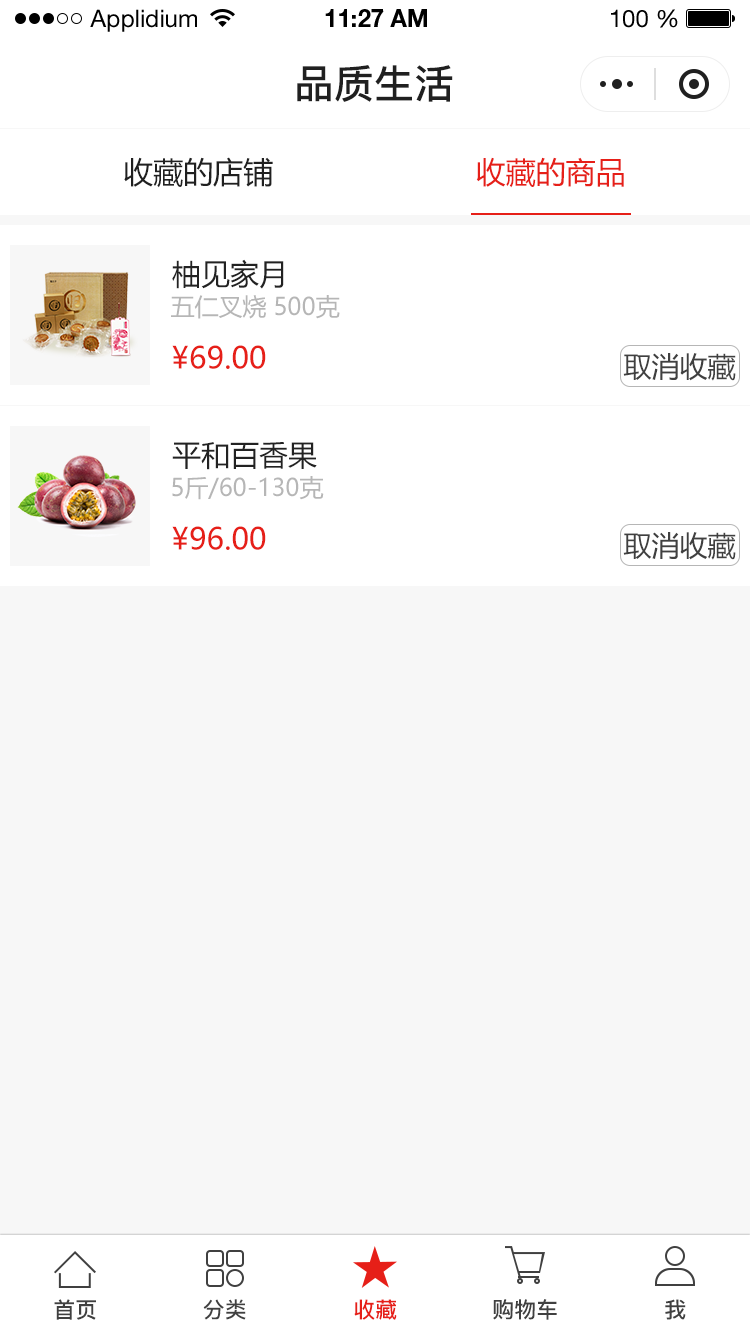
<style>
.page{position:relative;width:750px;height:1334px;background:#f7f7f7}
.page>*{position:absolute;margin:0}
.t1{font:24px "HelveticaNeueLTStd-Roman";color:#000000}
.t2{font:24px "HelveticaNeueLTStd-Bd";color:#000000}
.t3{font:40px "PingFang-SC-Bold";color:#202020;text-transform:uppercase}
.t4{font:30px "MicrosoftYaHei";color:#202020;text-transform:uppercase}
.t5{font:30px "MicrosoftYaHei";color:#e61f18;text-transform:uppercase}
.t6{font:29px "MicrosoftYaHei";color:#222222;text-transform:uppercase}
.t7{font:24px "MicrosoftYaHei";color:#b6b6b6;text-transform:uppercase}
.t8{font:28px "MicrosoftYaHei";color:#404040;text-transform:uppercase}
.t9{font:22px "PingFang-SC-Bold";color:#404040;text-transform:uppercase}
.t10{font:22px "PingFang-SC-Bold";color:#e61f18;text-transform:uppercase}
</style>
<div class="page">
<p class="t1" style="left:90px;top:9px;width:107px;height:23px">Applidium</p>
<p class="t2" style="left:325px;top:9px;width:102px;height:18px">11:27 AM</p>
<p class="t1" style="left:611px;top:9px;width:67px;height:19px">100 %</p>
<p class="t3" style="left:297px;top:65px;width:156px;height:37px">品质生活</p>
<p class="t4" style="left:124px;top:157px;width:149px;height:31px">收藏的店铺</p>
<p class="t5" style="left:476px;top:157px;width:148px;height:31px">收藏的商品</p>
<p class="t6" style="left:172px;top:259px;width:112px;height:30px">柚见家月</p>
<p class="t7" style="left:171px;top:295px;width:169px;height:24px">五仁叉烧 500克</p>
<p class="t5" style="left:172px;top:345px;width:94px;height:24px">¥69.00</p>
<p class="t8" style="left:623px;top:353px;width:113px;height:28px">取消收藏</p>
<p class="t6" style="left:172px;top:442px;width:145px;height:28px">平和百香果</p>
<p class="t7" style="left:172px;top:476px;width:152px;height:24px">5斤/60-130克</p>
<p class="t5" style="left:172px;top:526px;width:94px;height:24px">¥96.00</p>
<p class="t8" style="left:623px;top:532px;width:113px;height:28px">取消收藏</p>
<p class="t9" style="left:54px;top:1299px;width:42px;height:21px">首页</p>
<p class="t9" style="left:203px;top:1299px;width:43px;height:21px">分类</p>
<p class="t10" style="left:354px;top:1299px;width:43px;height:21px">收藏</p>
<p class="t9" style="left:493px;top:1299px;width:64px;height:21px">购物车</p>
<p class="t9" style="left:665px;top:1299px;width:21px;height:21px">我</p>
</div>
